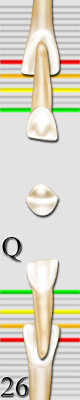
<style>
.page{position:relative;width:80px;height:400px;background:#e4e3e3}
.page>*{position:absolute;margin:0}
.t1{font:28.4px "TimesNewRomanPSMT";letter-spacing:0.005em;color:#000000}
</style>
<div class="page">
<p class="t1" style="left:2px;top:237px;width:19px;height:25px">Q</p>
<p class="t1" style="left:1px;top:377px;width:27px;height:20px">26</p>
</div>
